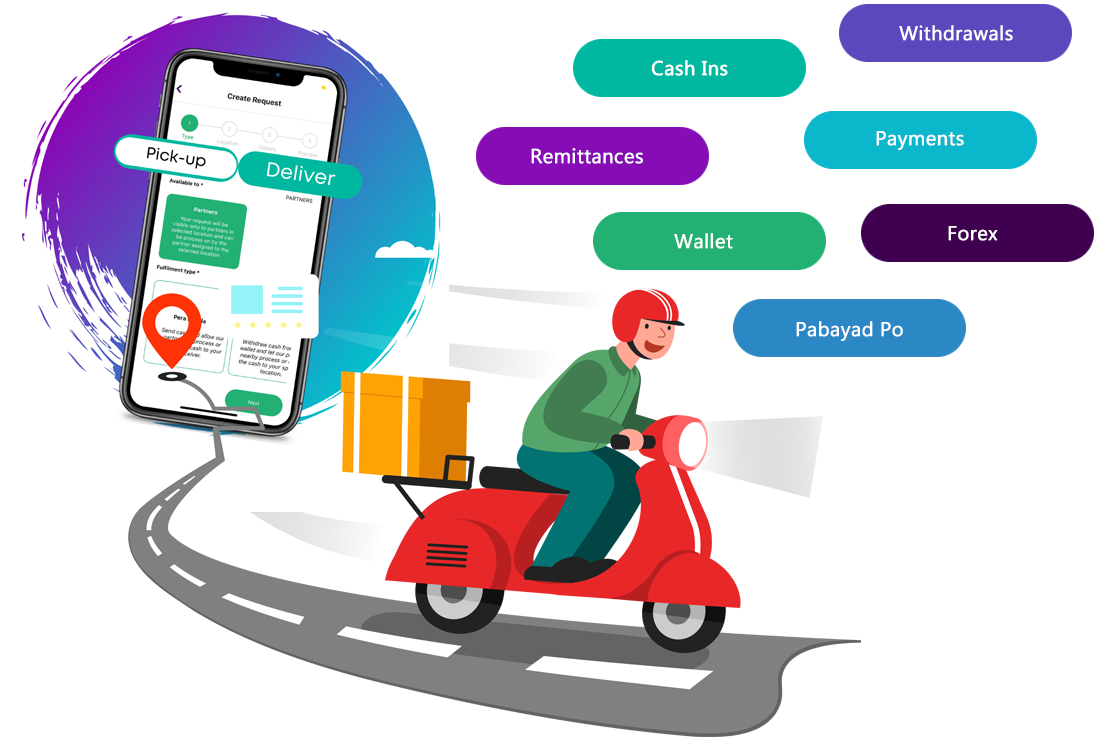
<style>
.page{position:relative;width:1100px;height:750px;background:#ffffff}
.page>*{position:absolute;margin:0}
.t1{font:20px "MicrosoftPhagsPa";color:#ffffff;font-weight:bold}
.t2{font:20.1px "MicrosoftPhagsPa";color:#ffffff;font-weight:bold}
</style>
<div class="page">
<p class="t1" style="left:899px;top:25px;width:114px;height:16px">Withdrawals</p>
<p class="t1" style="left:651px;top:60px;width:77px;height:16px">Cash Ins</p>
<p class="t1" style="left:876px;top:131px;width:88px;height:19px">Payments</p>
<p class="t2" style="left:531px;top:148px;width:112px;height:16px">Remittances</p>
<p class="t1" style="left:674px;top:233px;width:59px;height:16px">Wallet</p>
<p class="t1" style="left:948px;top:226px;width:50px;height:15px">Forex</p>
<p class="t1" style="left:796px;top:321px;width:107px;height:20px">Pabayad Po</p>
</div>
